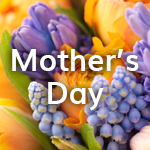
<style>
.page{position:relative;width:150px;height:150px}
.page>*{position:absolute;margin:0}
.t1{font:29.8px/33px "Muli-Bold";color:#ffffff}
</style>
<div class="page">
<p class="t1" style="left:12px;top:49px;width:127px;height:62px;text-align:center">Mother’s<br>Day</p>
</div>
